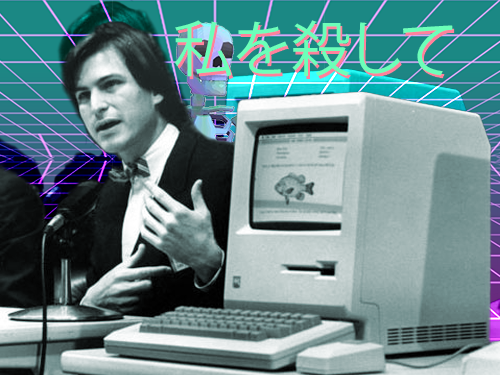
<style>
.page{position:relative;width:500px;height:375px}
.page>*{position:absolute;margin:0}
.t1{font:60px "KozGoPr6N-Regular";color:#6cffb9}
</style>
<div class="page">
<p class="t1" style="left:175px;top:20px;width:278px;height:57px">私を殺して</p>
</div>
